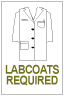
<style>
.page{position:relative;width:64px;height:96px;background:#ffffff}
.page>*{position:absolute;margin:0}
.t1{font:12px/10.7px "Arial-BoldMT";letter-spacing:-0.06em;color:#737310;scale:0.9 1}
</style>
<div class="page">
<p class="t1" style="left:5px;top:64px;width:54px;height:22px;text-align:center">LABCOATS<br>REQUIRED</p>
</div>
